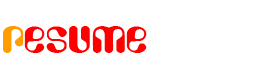
<style>
.page{position:relative;width:279px;height:68px;background:#ffffff}
.page>*{position:absolute;margin:0}
.t1{font:48px "Asimov";color:#ff0000}
.t2{font:48px "Asimov";color:#ff9c00}
</style>
<div class="page">
<p class="t1" style="left:3px;top:26px;width:144px;height:27px"><span class="t2">r</span>esume</p>
</div>
